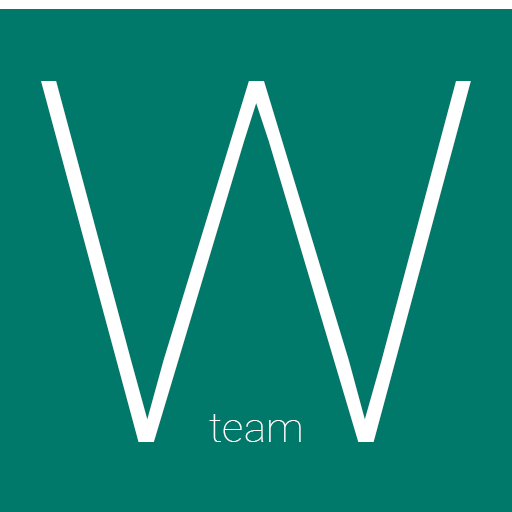
<style>
.page{position:relative;width:512px;height:512px;background:#00796b}
.page>*{position:absolute;margin:0}
.t1{font:508px "Roboto-Thin";color:#ffffff}
.t2{font:42.3px "Roboto-Thin";color:#ffffff}
</style>
<div class="page">
<p class="t1" style="left:41px;top:81px;width:430px;height:361px">W</p>
<p class="t2" style="left:209px;top:414px;width:92px;height:28px">team</p>
</div>
